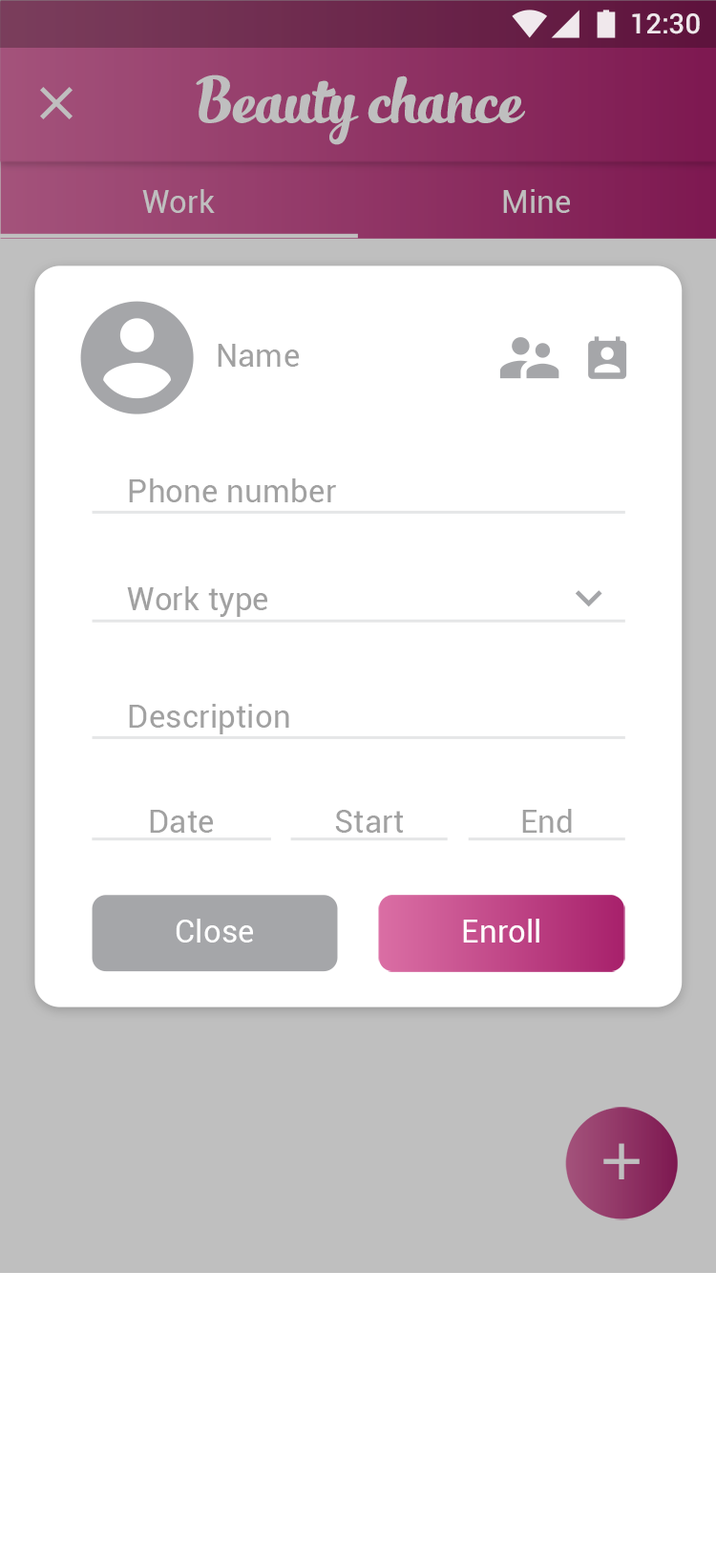
<style>
.page{position:relative;width:716px;height:1568px;background:#ffffff}
.page>*{position:absolute;margin:0}
.t1{font:27.8px "Roboto-Medium";color:#ffffff}
.t2{font:31.8px "Roboto-Regular";color:#a1a1a1}
.t3{font:31.8px "Roboto-Regular";color:#ffffff}
</style>
<div class="page">
<p class="t1" style="left:632px;top:13px;width:68px;height:21px">12:30</p>
<p class="t2" style="left:218px;top:344px;width:81px;height:23px">Name</p>
<p class="t2" style="left:129px;top:478px;width:207px;height:24px">Phone number</p>
<p class="t2" style="left:127px;top:586px;width:140px;height:31px">Work type</p>
<p class="t2" style="left:129px;top:704px;width:160px;height:30px">Description</p>
<p class="t2" style="left:150px;top:810px;width:63px;height:23px">Date</p>
<p class="t2" style="left:335px;top:810px;width:69px;height:23px">Start</p>
<p class="t2" style="left:522px;top:809px;width:50px;height:24px">End</p>
<p class="t3" style="left:176px;top:919px;width:77px;height:24px">Close</p>
<p class="t3" style="left:463px;top:919px;width:77px;height:24px">Enroll</p>
</div>
